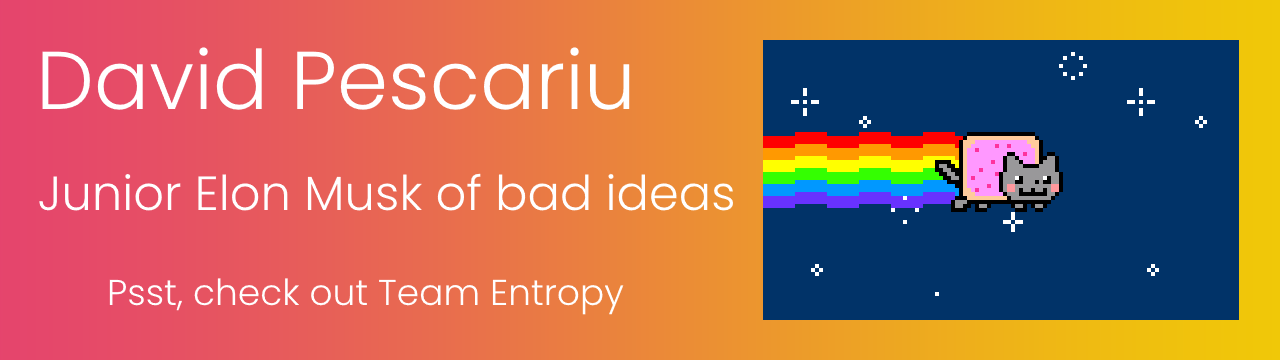
<style>
.page{position:relative;width:1280px;height:360px;background:#013368}
.page>*{position:absolute;margin:0}
.t1{font:82px "Poppins-Light";color:#ffffff}
.t2{font:48px "Poppins-Light";color:#ffffff}
.t3{font:36px "Poppins-Light";color:#ffffff}
</style>
<div class="page">
<p class="t1" style="left:42px;top:47px;width:588px;height:63px">David Pescariu</p>
<p class="t2" style="left:39px;top:173px;width:695px;height:38px">Junior Elon Musk of bad ideas</p>
<p class="t3" style="left:109px;top:278px;width:515px;height:37px">Psst, check out Team Entropy</p>
</div>
